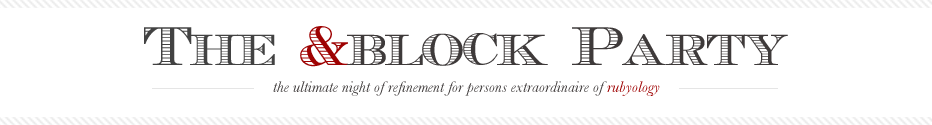
<style>
.page{position:relative;width:932px;height:125px;background:#ffffff}
.page>*{position:absolute;margin:0}
.t1{font:56px "EcuyerDAX";letter-spacing:-0.05em;color:#3e3a3a}
.t2{font:56px "EcuyerDAX";letter-spacing:-0.05em;color:#424242}
.t3{font:56px "EcuyerDAX";letter-spacing:-0.05em;color:#9e0202}
.t4{font:16px "Baskerville-Italic";color:#3e3a3a}
.t5{font:16px "Baskerville-Italic";color:#9e0202}
</style>
<div class="page">
<p class="t1" style="left:144px;top:26px;width:644px;height:41px"><span class="t2">The</span><span class="t3"> &amp;</span>block Party</p>
<p class="t4" style="left:273px;top:81px;width:387px;height:15px">the ultimate night of refinement for persons extraordinaire of <span class="t5">rubyology</span></p>
</div>
